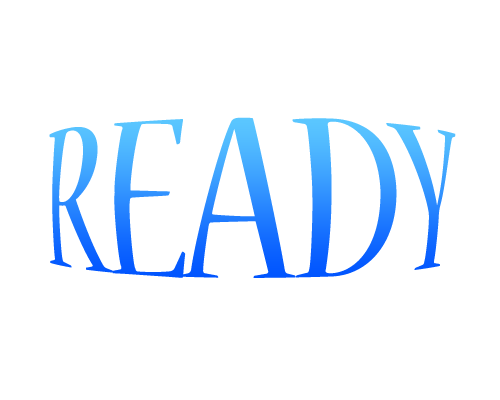
<style>
.page{position:relative;width:500px;height:400px;background:#ffffff}
.page>*{position:absolute;margin:0}
.t1{font:208.3px "NuevaStd-Cond";letter-spacing:-0.02em}
</style>
<div class="page">
<p class="t1" style="left:49px;top:117px;width:407px;height:161px">READY</p>
</div>
